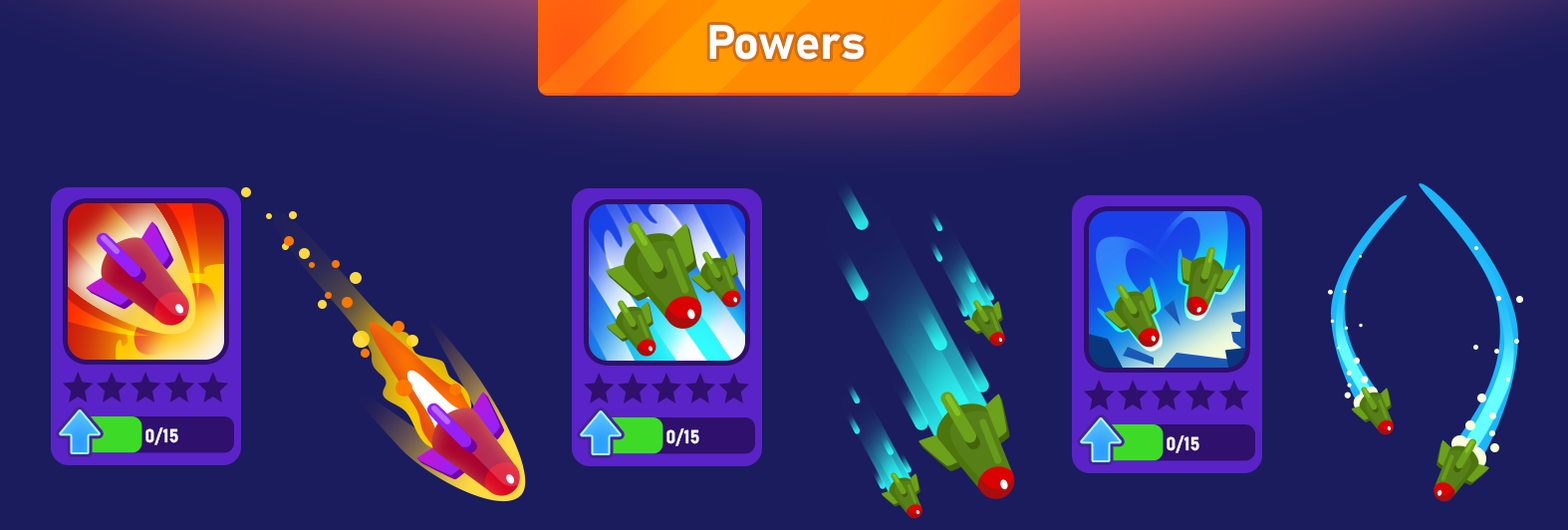
<style>
.page{position:relative;width:1568px;height:530px;background:#1a1c5d}
.page>*{position:absolute;margin:0}
.t1{font:47.5px "Bahnschrift-Bold";color:#ffffff}
.t2{font:18.5px "Bahnschrift-Bold";color:#ffffff}
</style>
<div class="page">
<p class="t1" style="left:709px;top:25px;width:155px;height:35px">Powers</p>
<p class="t2" style="left:145px;top:427px;width:33px;height:18px">0/15</p>
<p class="t2" style="left:666px;top:428px;width:33px;height:18px">0/15</p>
<p class="t2" style="left:1167px;top:435px;width:32px;height:18px">0/15</p>
</div>
